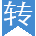
<style>
.page{position:relative;width:36px;height:36px;background:#438bd1}
.page>*{position:absolute;margin:0}
.t1{font:26.6px "STHeitiSC-Light";letter-spacing:0.06em;color:#ffffff;scale:1.17 1}
</style>
<div class="page">
<p class="t1" style="left:3px;top:1px;width:30px;height:25px">转</p>
</div>
